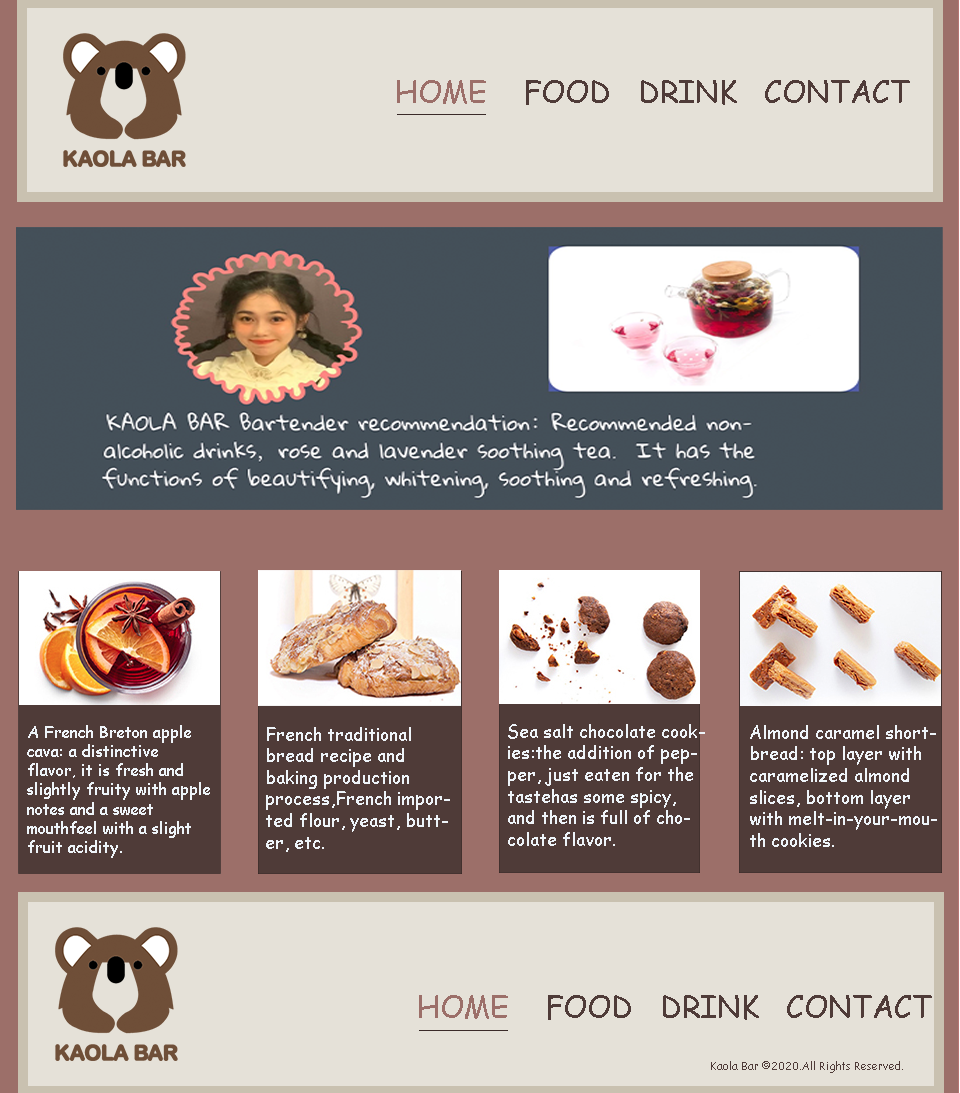
<style>
.page{position:relative;width:960px;height:1093px;background:#e5e1d8}
.page>*{position:absolute;margin:0}
.t1{font:30px "ComicSansMS";color:#4f3b38}
.t2{font:30px "ComicSansMS";color:#9c6f69}
.t3{font:16px "ComicSansMS";color:#eef4f9}
.t4{font:18px "ComicSansMS";color:#eef4f9}
.t5{font:11px "ComicSansMS";color:#4f3b38}
</style>
<div class="page">
<p class="t1" style="left:397px;top:80px;width:513px;height:25px"><span class="t2">HOME    </span>FOOD   DRINK   CONTACT</p>
<p class="t3" style="left:27px;top:725px;width:183px;height:133px">A French Breton apple <br>cava: a distinctive <br>flavor, it is fresh and <br>slightly fruity with apple <br>notes and a sweet <br>mouthfeel with a slight<br>fruit acidity.</p>
<p class="t4" style="left:508px;top:724px;width:197px;height:122px">Sea salt chocolate cook-<br>ies:the addition of pep-<br>per, just eaten for the<br>tastehas some spicy, <br>and then is full of cho-<br>colate flavor.</p>
<p class="t4" style="left:750px;top:725px;width:187px;height:122px">Almond caramel short-<br>bread: top layer with <br>caramelized almond <br>slices, bottom layer <br>with melt-in-your-mou-<br>th cookies.</p>
<p class="t4" style="left:266px;top:727px;width:184px;height:125px">French traditional <br>bread recipe and <br>baking production <br>process,French impor-<br>ted flour, yeast, butt-<br>er, etc.</p>
<p class="t1" style="left:419px;top:995px;width:513px;height:25px"><span class="t2">HOME    </span>FOOD   DRINK   CONTACT</p>
<p class="t5" style="left:711px;top:1061px;width:192px;height:12px">Kaola Bar ©2020.All Rights Reserved.</p>
</div>
